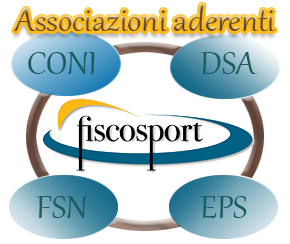
<style>
.page{position:relative;width:290px;height:244px;background:#ffffff}
.page>*{position:absolute;margin:0}
.t1{font:40px "Gabriola";color:#5d4238}
.t2{font:40px "Gabriola";color:#1a5d61}
</style>
<div class="page">
<p class="t1" style="left:14px;top:5px;width:261px;height:26px">Associazioni aderenti</p>
<p class="t2" style="left:28px;top:52px;width:67px;height:22px">CONI</p>
<p class="t2" style="left:200px;top:52px;width:57px;height:22px">DSA</p>
<p class="t2" style="left:36px;top:196px;width:51px;height:22px">FSN</p>
<p class="t2" style="left:200px;top:196px;width:47px;height:22px">EPS</p>
</div>
